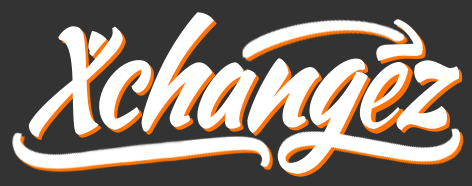
<style>
.page{position:relative;width:472px;height:186px;background:#333333}
.page>*{position:absolute;margin:0}
.t1{font:132px "KaushanScript-Regular";letter-spacing:-0.05em;color:#ffffff;font-weight:bold;font-style:italic;scale:0.86 1}
</style>
<div class="page">
<p class="t1" style="left:28px;top:12px;width:432px;height:162px">Xchangez</p>
</div>
